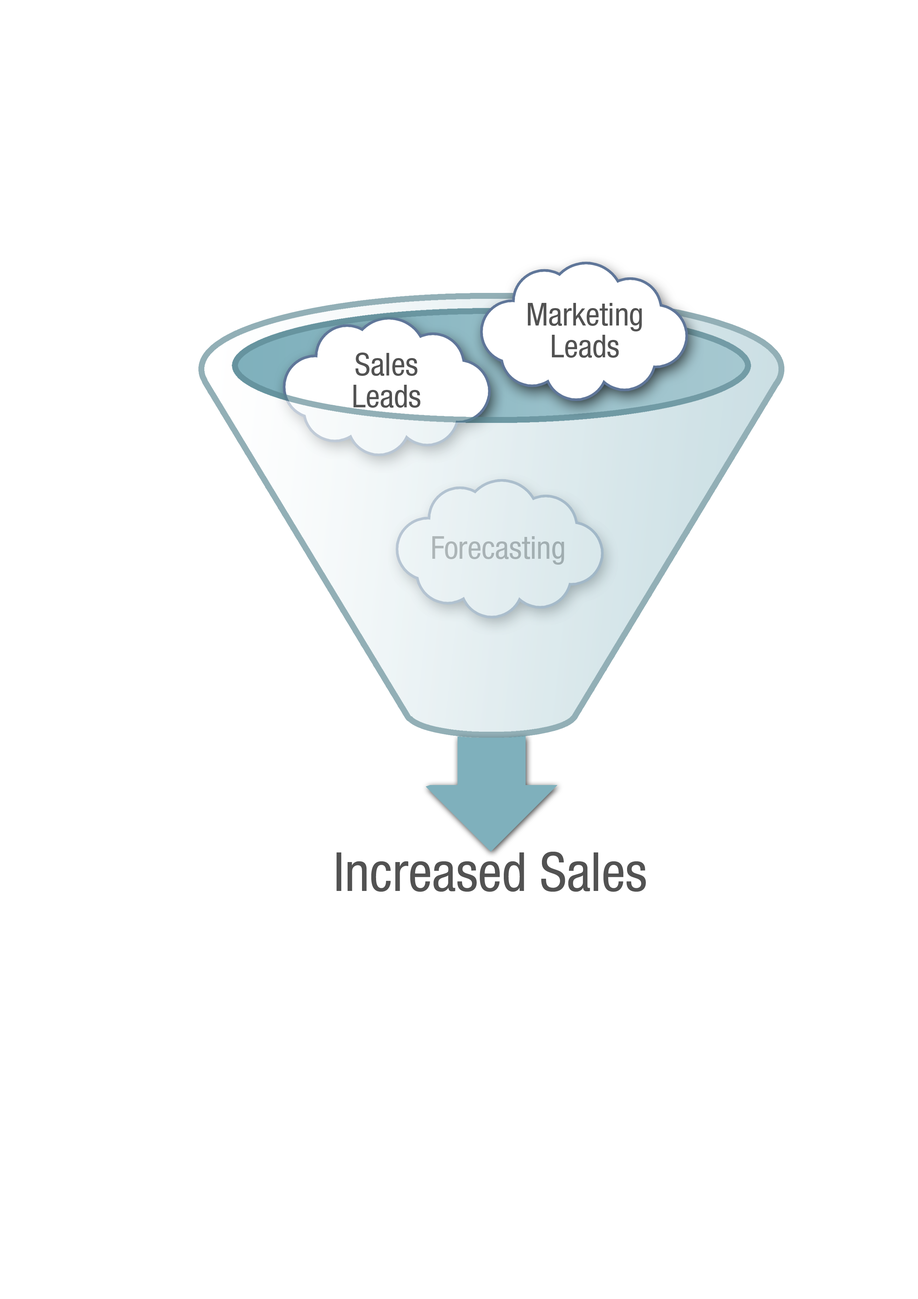
<style>
.page{position:relative;width:918px;height:1299px;background:#ffffff}
.page>*{position:absolute;margin:0}
.t1{font:31.6px/31.6px "HelveticaNeueLTPro-Cn";color:#525252}
.t2{font:31.6px "HelveticaNeueLTPro-Cn";color:#a7b1b4}
.t3{font:53.8px "HelveticaNeueLTPro-Cn";color:#525252}
</style>
<div class="page">
<p class="t1" style="left:528px;top:303px;width:114px;height:55px;text-align:center">Marketing<br>Leads</p>
<p class="t1" style="left:354px;top:352px;width:67px;height:56px;text-align:center">Sales<br>Leads</p>
<p class="t2" style="left:432px;top:536px;width:132px;height:29px">Forecasting</p>
<p class="t3" style="left:337px;top:852px;width:309px;height:40px">Increased Sales</p>
</div>
